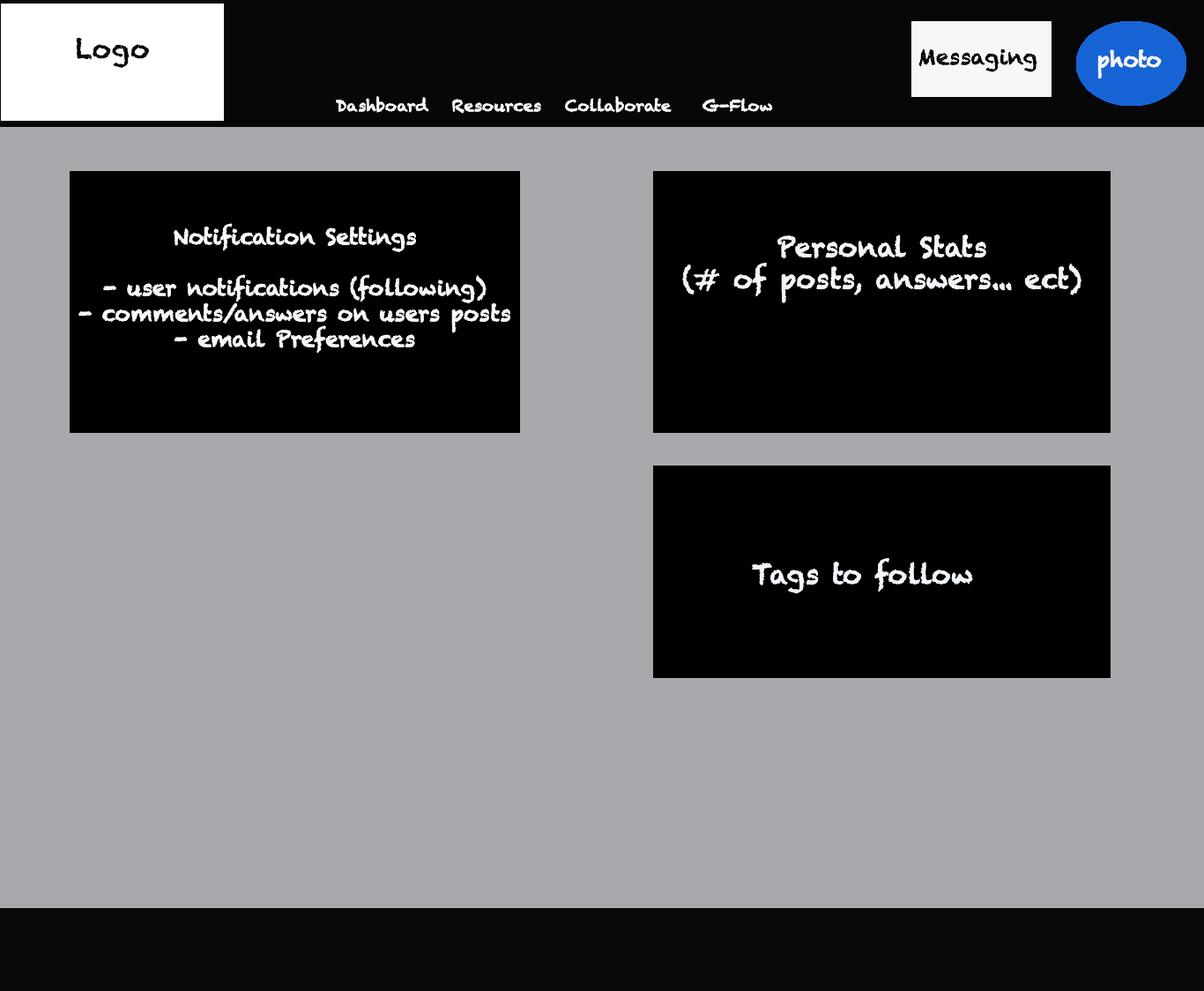
<style>
.page{position:relative;width:1204px;height:991px;background:#a7a9ac}
.page>*{position:absolute;margin:0}
.t1{font:15.9px "Chalkduster";color:#f9fafc}
.t2{font:26.4px "Chalkduster";color:#f9fafc}
.t3{font:21.2px "Chalkduster";color:#f9fafc}
.t4{font:26.4px "Chalkduster";color:#f3f6fa}
</style>
<div class="page">
<p class="t1" style="left:336px;top:96px;width:437px;height:18px"><span class="t2">           </span>Dashboard   Resources   Collaborate    G-Flow</p>
<p class="t3" style="left:78px;top:223px;width:432px;height:130px;text-align:center">Notification Settings<br><br>- user notifications (following)<br>- comments/answers on users posts<br>- email Preferences</p>
<p class="t4" style="left:682px;top:234px;width:399px;height:69px;text-align:center">Personal Stats<br>(# of posts, answers... ect)</p>
<p class="t4" style="left:752px;top:558px;width:221px;height:35px">Tags to follow</p>
</div>
